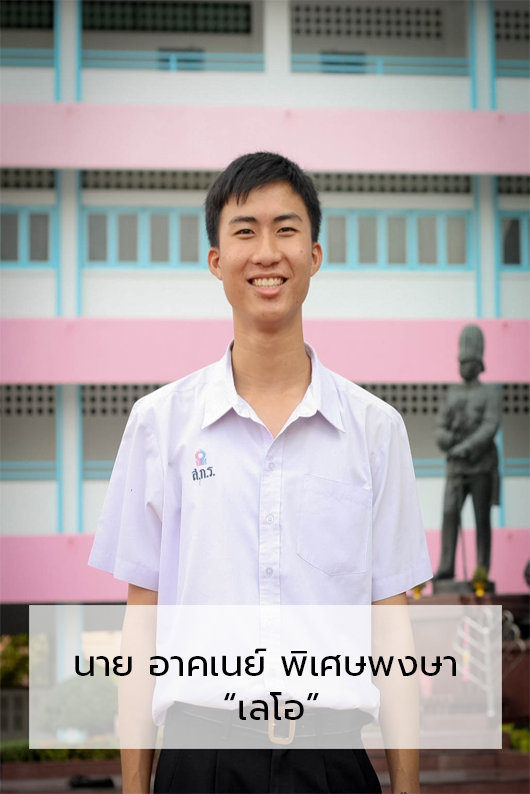
<style>
.page{position:relative;width:530px;height:794px}
.page>*{position:absolute;margin:0}
.t1{font:36.7px "Prompt-Regular";color:#000000}
</style>
<div class="page">
<p class="t1" style="left:75px;top:648px;width:381px;height:72px">นาย อาคเนย์ พิเศษพงษา<br>           “เลโอ”</p>
</div>
